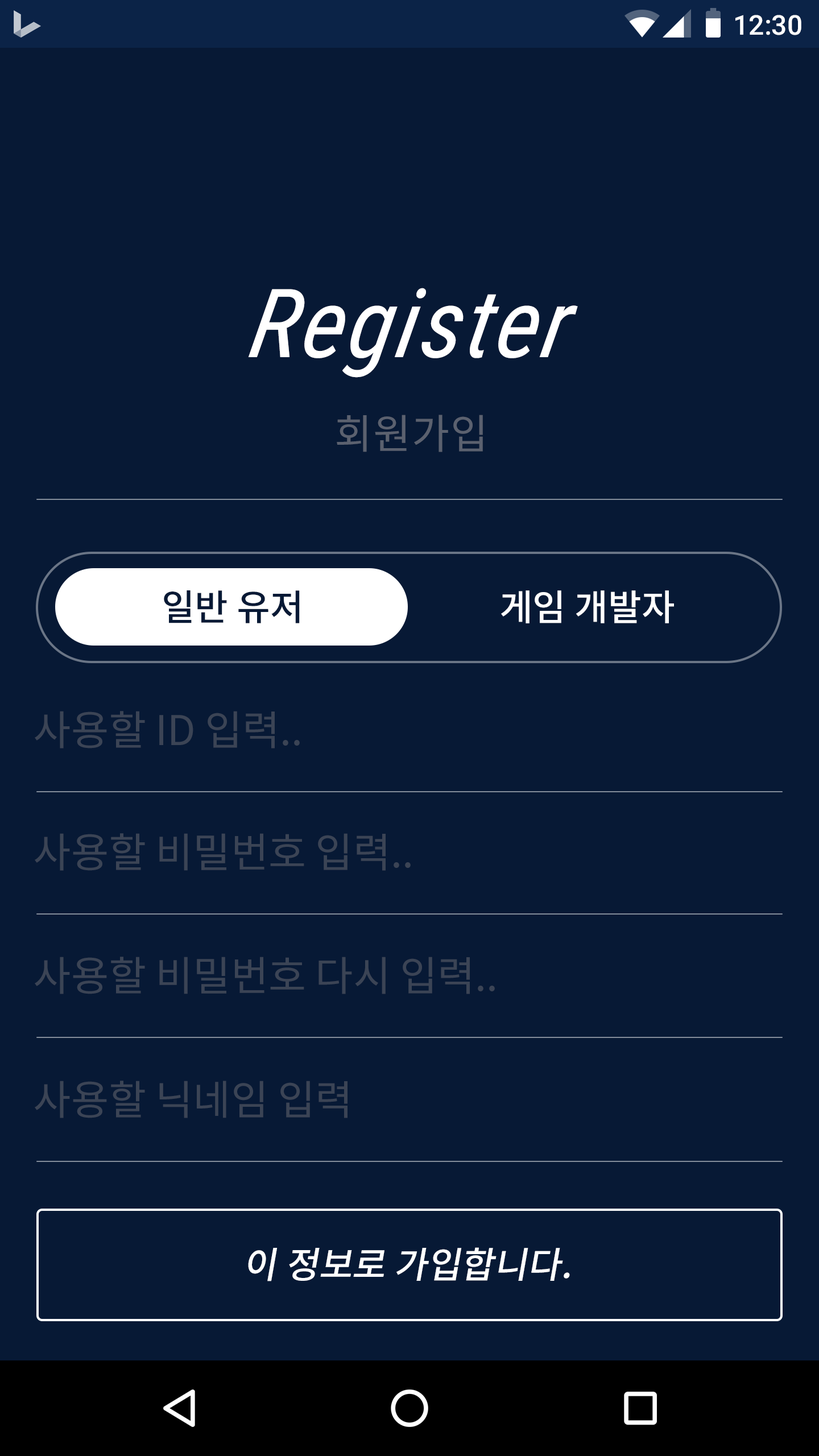
<style>
.page{position:relative;width:819px;height:1456px;background:#071935}
.page>*{position:absolute;margin:0}
.t1{font:27.3px "Roboto-Medium";color:#ffffff}
.t2{font:95.5px "RobotoCondensed-Italic";letter-spacing:0.025em;color:#ffffff;font-style:italic}
.t3{font:40.9px "NotoSansCJKkr-Regular";letter-spacing:0.025em;color:#5b616f}
.t4{font:36.4px "NotoSansCJKkr-Medium";color:#071935}
.t5{font:36.4px "NotoSansCJKkr-Medium";color:#ffffff}
.t6{font:40.9px "NotoSansCJKkr-Regular";color:#3b4455}
.t7{font:36.4px "NotoSansCJKkr-Medium";color:#ffffff;font-style:italic}
</style>
<div class="page">
<p class="t1" style="left:735px;top:15px;width:66px;height:20px">12:30</p>
<p class="t2" style="left:248px;top:288px;width:330px;height:90px">Register</p>
<p class="t3" style="left:337px;top:415px;width:146px;height:37px">회원가입</p>
<p class="t4" style="left:164px;top:590px;width:136px;height:33px">일반 유저</p>
<p class="t5" style="left:501px;top:590px;width:173px;height:33px">게임 개발자</p>
<p class="t6" style="left:35px;top:711px;width:265px;height:37px">사용할 ID 입력..</p>
<p class="t6" style="left:35px;top:833px;width:376px;height:38px">사용할 비밀번호 입력..</p>
<p class="t6" style="left:35px;top:957px;width:460px;height:37px">사용할 비밀번호 다시 입력..</p>
<p class="t6" style="left:35px;top:1081px;width:313px;height:37px">사용할 닉네임 입력</p>
<p class="t7" style="left:248px;top:1247px;width:322px;height:34px">이 정보로 가입합니다.</p>
</div>
